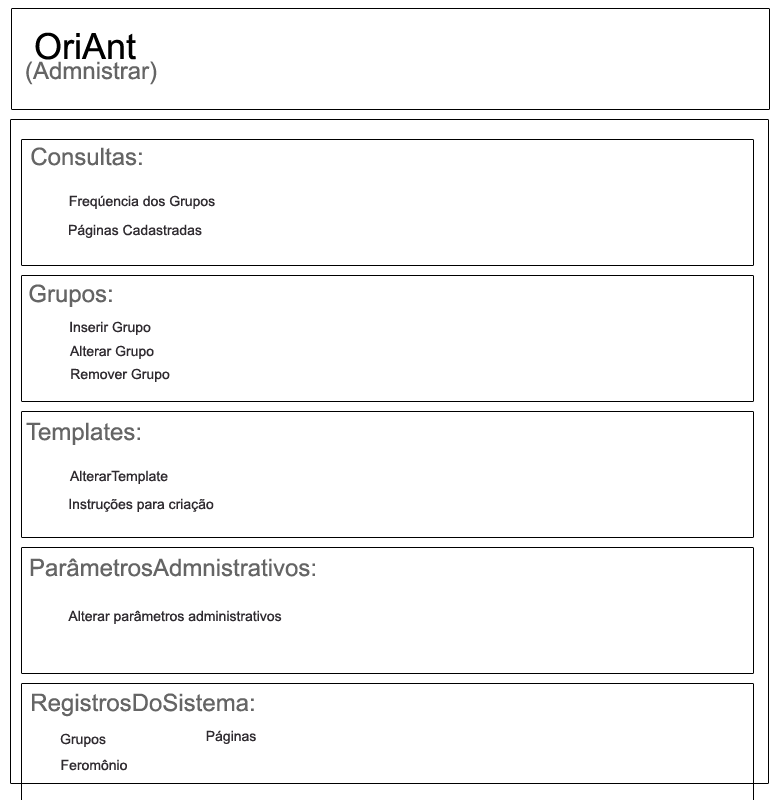
<style>
.page{position:relative;width:780px;height:800px;background:#ffffff}
.page>*{position:absolute;margin:0}
.t1{font:36px "ArialMT";color:#000000}
.t2{font:24px "ArialMT";color:#656565}
.t3{font:14px "ArialMT";color:#2f2b30}
</style>
<div class="page">
<p class="t1" style="left:35px;top:32px;width:101px;height:28px">OriAnt</p>
<p class="t2" style="left:26px;top:61px;width:131px;height:24px">(Admnistrar)</p>
<p class="t2" style="left:31px;top:147px;width:111px;height:19px">Consultas:</p>
<p class="t3" style="left:69px;top:195px;width:146px;height:14px">Freqúencia dos Grupos</p>
<p class="t3" style="left:69px;top:224px;width:133px;height:14px">Páginas Cadastradas</p>
<p class="t2" style="left:29px;top:284px;width:83px;height:23px">Grupos:</p>
<p class="t3" style="left:70px;top:321px;width:81px;height:14px">Inserir Grupo</p>
<p class="t3" style="left:69px;top:345px;width:85px;height:14px">Alterar Grupo</p>
<p class="t3" style="left:71px;top:368px;width:99px;height:14px">Remover Grupo</p>
<p class="t2" style="left:26px;top:422px;width:114px;height:23px">Templates:</p>
<p class="t3" style="left:69px;top:470px;width:99px;height:14px">AlterarTemplate</p>
<p class="t3" style="left:69px;top:498px;width:145px;height:14px">Instruções para criação</p>
<p class="t2" style="left:30px;top:558px;width:285px;height:19px">ParâmetrosAdmnistrativos:</p>
<p class="t3" style="left:68px;top:610px;width:214px;height:14px">Alterar parâmetros administrativos</p>
<p class="t2" style="left:32px;top:693px;width:222px;height:24px">RegistrosDoSistema:</p>
<p class="t3" style="left:60px;top:733px;width:46px;height:14px">Grupos</p>
<p class="t3" style="left:206px;top:730px;width:50px;height:14px">Páginas</p>
<p class="t3" style="left:61px;top:759px;width:66px;height:12px">Feromônio</p>
</div>
